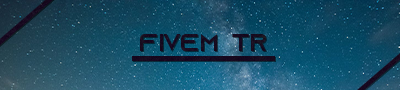
<style>
.page{position:relative;width:400px;height:90px}
.page>*{position:absolute;margin:0}
.t1{font:24px "AzonixRegular";color:#170b1f}
</style>
<div class="page">
<p class="t1" style="left:140px;top:34px;width:126px;height:17px">FiveM TR</p>
</div>
